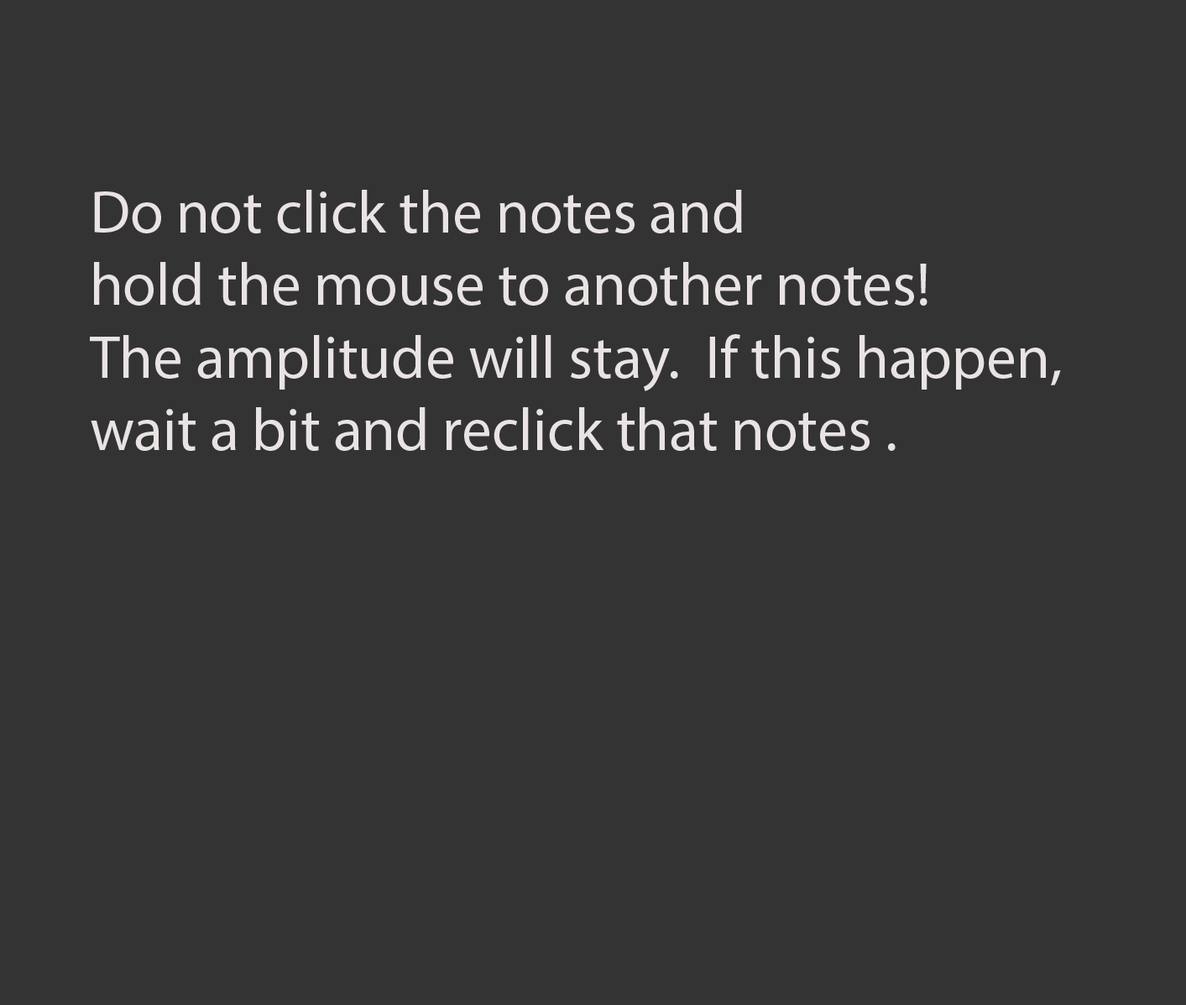
<style>
.page{position:relative;width:1186px;height:1005px;background:#333333}
.page>*{position:absolute;margin:0}
.t1{font:60.5px "MyriadPro-Regular";color:#e9e3e3}
</style>
<div class="page">
<p class="t1" style="left:90px;top:190px;width:971px;height:261px">Do not click the notes and <br>hold the mouse to another notes!<br>The amplitude will stay.  If this happen,<br>wait a bit and reclick that notes .</p>
</div>
